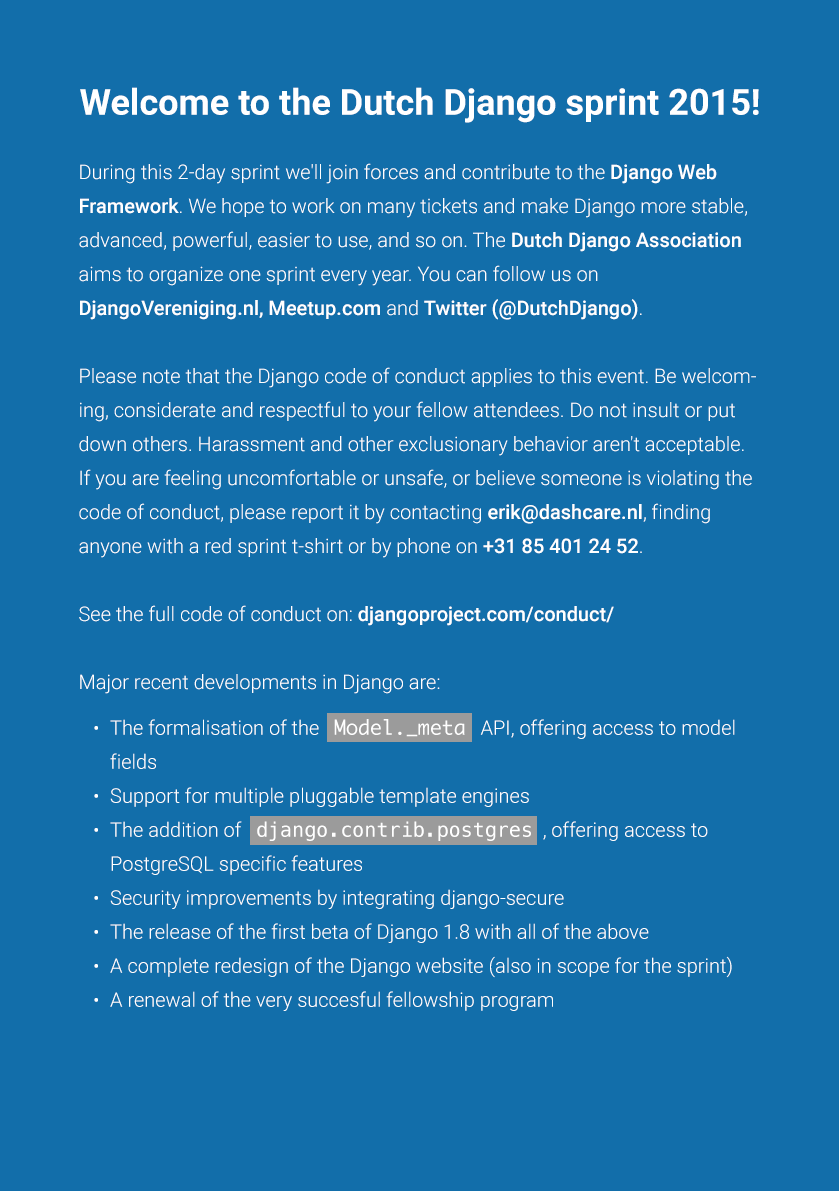
<style>
.page{position:relative;width:839px;height:1191px;background:#126eaa}
.page>*{position:absolute;margin:0}
.t1{font:36px "Roboto-Bold";color:#ffffff}
.t2{font:20px/34px "Roboto-Light";color:#ffffff}
.t3{font:20px/34px "Roboto-Medium";color:#ffffff}
.t4{font:20px/34px "Monaco";color:#ffffff}
.t5{font:20px/34px "Menlo-Regular";color:#ffffff}
</style>
<div class="page">
<p class="t1" style="left:80px;top:87px;width:679px;height:36px">Welcome to the Dutch Django sprint 2015!</p>
<p class="t2" style="left:79px;top:163px;width:677px;height:531px">During this 2-day sprint we'll join forces and contribute to the <span class="t3">Django Web Framework</span>. We hope to work on many tickets and make Django more stable, advanced, powerful, easier to use, and so on. The <span class="t3">Dutch Django Association</span> aims to organize one sprint every year. You can follow us on<br><span class="t3">DjangoVereniging.nl, Meetup.com </span>and <span class="t3">Twitter (@DutchDjango)</span>.<br><br>Please note that the Django code of conduct applies to this event. Be welcoming, considerate and respectful to your fellow attendees. Do not insult or put down others. Harassment and other exclusionary behavior aren't acceptable.<br>If you are feeling uncomfortable or unsafe, or believe someone is violating the<br>code of conduct, please report it by contacting <span class="t3">erik@dashcare.nl</span>, finding anyone with a red sprint t-shirt or by phone on <span class="t3">+31 85 401 24 52</span>.<br><br>See the full code of conduct on: <span class="t3">djangoproject.com/conduct/<br></span><br>Major recent developments in Django are:</p>
<p class="t2" style="left:94px;top:726px;width:4px;height:276px">•<br><br>•<br>•<br><br>•<br>•<br>•<br>•</p>
<p class="t2" style="left:110px;top:719px;width:625px;height:292px">The formalisation of the   <span class="t4">Model._meta</span>   API, offering access to model fields<br>Support for multiple pluggable template engines<br>The addition of   <span class="t5">django.contrib.postgres</span>  , offering access to PostgreSQL specific features<br>Security improvements by integrating django-secure<br>The release of the first beta of Django 1.8 with all of the above<br>A complete redesign of the Django website (also in scope for the sprint)<br>A renewal of the very succesful fellowship program</p>
</div>
